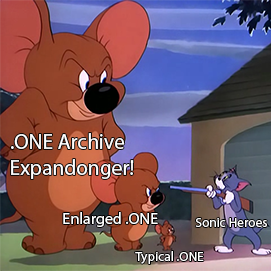
<style>
.page{position:relative;width:271px;height:271px}
.page>*{position:absolute;margin:0}
.t1{font:21.3px "MyriadPro-Regular";color:#ffffff}
.t2{font:16px "MyriadPro-Regular";color:#ffffff}
.t3{font:13.3px "MyriadPro-Regular";color:#ffffff}
</style>
<div class="page">
<p class="t1" style="left:11px;top:133px;width:123px;height:46px">.ONE Archive<br>Expandonger!</p>
<p class="t2" style="left:63px;top:212px;width:95px;height:15px">Enlarged .ONE</p>
<p class="t3" style="left:195px;top:218px;width:72px;height:9px">Sonic Heroes</p>
<p class="t3" style="left:135px;top:251px;width:69px;height:13px">Typical .ONE</p>
</div>
